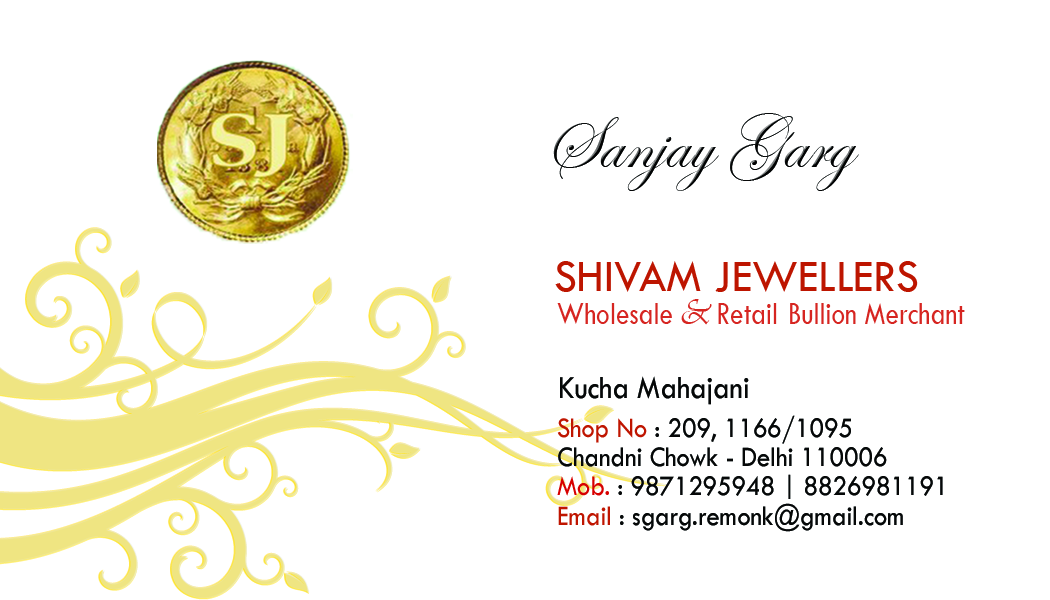
<style>
.page{position:relative;width:1050px;height:600px;background:#ffffff}
.page>*{position:absolute;margin:0}
.t1{font:75px "EdwardianScriptITC";color:#060808}
.t2{font:45.8px "TwCenMT-Regular";color:#bd1500}
.t3{font:33.3px "TwCenMT-Regular";color:#d62521;scale:0.82 1}
.t4{font:37.5px "Vivaldii";color:#d62521;scale:0.82 1}
.t5{font:33.3px "TwCenMT-Regular";color:#be1500;scale:0.82 1}
.t6{font:33.3px "TwCenMT-Regular";color:#060808;scale:0.9 1}
.t7{font:29.2px/29.2px "TwCenMT-Regular";color:#060808;scale:0.9 1}
.t8{font:29.2px/29.2px "TwCenMT-Regular";color:#be1500;scale:0.9 1}
.t9{font:29.2px/29.2px "TwCenMT-Regular";color:#d70000;scale:0.9 1}
</style>
<div class="page">
<p class="t1" style="left:553px;top:113px;width:306px;height:78px">Sanjay Garg</p>
<p class="t2" style="left:555px;top:261px;width:363px;height:31px">SHIVAM JEWELLERS</p>
<p class="t3" style="left:557px;top:299px;width:408px;height:26px">Wholesale <span class="t4">&amp; </span>Retail  Bullion Merchant<br><span class="t5"><br>Merchant</span></p>
<p class="t6" style="left:560px;top:376px;width:189px;height:29px">Kucha Mahajani</p>
<p class="t7" style="left:557px;top:415px;width:386px;height:117px"><span class="t8">Shop No</span> : 209, 1166/1095<br>Chandni Chowk - Delhi 110006<br><span class="t9">Mob.</span> : 9871295948 | 8826981191<br><span class="t8">Email</span> : sgarg.remonk@gmail.com</p>
</div>
